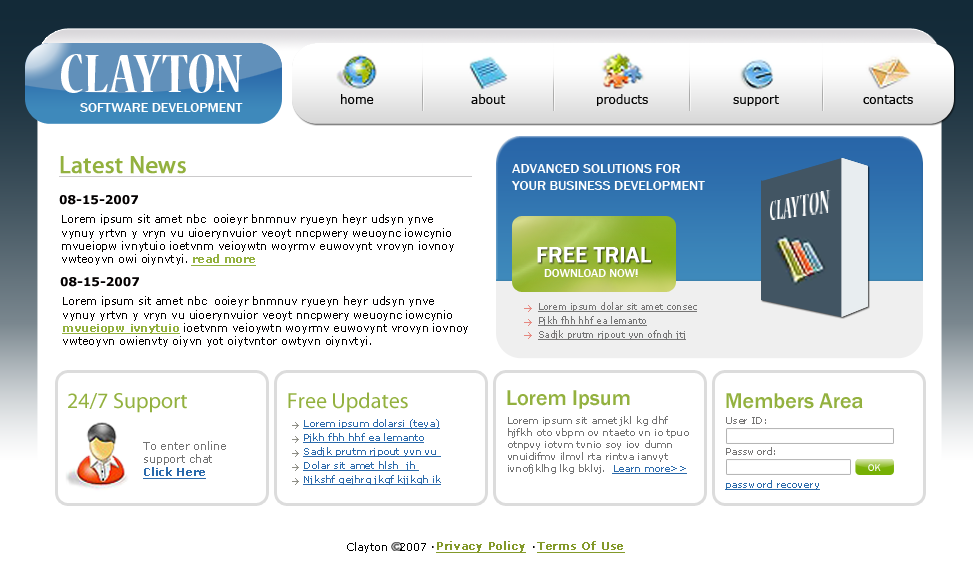
<style>
.page{position:relative;width:973px;height:579px;background:#ffffff}
.page>*{position:absolute;margin:0}
.t1{font:60px "NuevaStd-BoldCond";color:#ffffff}
.t2{font:12px "Verdana";color:#000000}
.t3{font:14px "FranklinGothic-Medium";color:#ffffff}
.t4{font:24px "MyriadPro-Regular";color:#93b13f;font-weight:bold}
.t5{font:12px "Verdana-Bold";color:#030000}
.t6{font:11px "Verdana";color:#030000}
.t7{font:11px "Verdana-Bold";color:#93b13f;text-decoration:underline}
.t8{font:22px "FranklinGothic-Medium";color:#ffffff;font-weight:bold}
.t9{font:12px "FranklinGothic-Medium";color:#ffffff}
.t10{font:9px "Verdana";color:#767575;text-decoration:underline}
.t11{font:22px "FranklinGothic-Medium";color:#93b13f}
.t12{font:22px "MyriadPro-Regular";color:#93b13f}
.t13{font:10px "Verdana";color:#2b6aab;text-decoration:underline}
.t14{font:10px "Verdana";color:#737373}
.t15{font:10px "Verdana";color:#767575}
.t16{font:11px "Verdana";color:#737373}
.t17{font:11px "Verdana-Bold";color:#2b6aab;text-decoration:underline}
.t18{font:10px "FranklinGothic-Medium";color:#ffffff}
.t19{font:10px "Verdana";color:#2b6bab;text-decoration:underline}
.t20{font:11px "Verdana";color:#000000}
.t21{font:11px "Verdana";color:#83992a;font-weight:bold;text-decoration:underline}
</style>
<div class="page">
<p class="t1" style="left:61px;top:54px;width:181px;height:39px">CLAYTON</p>
<p class="t2" style="left:341px;top:94px;width:33px;height:10px">home</p>
<p class="t2" style="left:471px;top:94px;width:35px;height:10px">about</p>
<p class="t2" style="left:597px;top:94px;width:51px;height:12px">products</p>
<p class="t2" style="left:733px;top:95px;width:46px;height:11px">support</p>
<p class="t2" style="left:863px;top:95px;width:50px;height:9px">contacts</p>
<p class="t3" style="left:80px;top:103px;width:163px;height:9px">SOFTWARE DEVELOPMENT</p>
<p class="t4" style="left:60px;top:156px;width:126px;height:18px">Latest News</p>
<p class="t3" style="left:511px;top:164px;width:194px;height:26px">ADVANCED SOLUTIONS FOR<br>YOUR BUSINESS DEVELOPMENT</p>
<p class="t5" style="left:59px;top:195px;width:79px;height:10px">08-15-2007</p>
<p class="t6" style="left:62px;top:214px;width:392px;height:52px">Lorem ipsum sit amet nbc  ooieyr bnmnuv ryueyn heyr udsyn ynve vynuy yrtvn y vryn vu uioerynvuior veoyt nncpwery weuoync iowcynio mvueiopw ivnytuio ioetvnm veioywtn woyrmv euwovynt vrovyn iovnoy vwteoyvn owi oiynvtyi. <span class="t7">read more</span></p>
<p class="t8" style="left:537px;top:247px;width:114px;height:16px">FREE TRIAL</p>
<p class="t9" style="left:544px;top:269px;width:94px;height:8px">DOWNLOAD NOW!</p>
<p class="t5" style="left:60px;top:277px;width:79px;height:10px">08-15-2007</p>
<p class="t6" style="left:62px;top:296px;width:406px;height:51px">Lorem ipsum sit amet nbc  ooieyr bnmnuv ryueyn heyr udsyn ynve vynuy yrtvn y vryn vu uioerynvuior veoyt nncpwery weuoync iowcynio <span class="t7">mvueiopw ivnytuio </span>ioetvnm veioywtn woyrmv euwovynt vrovyn iovnoy vwteoyvn owienvty oiyvn yot oiytvntor owtyvn oiynvtyi.</p>
<p class="t10" style="left:538px;top:302px;width:159px;height:10px">Lorem ipsum dolar sit amet consec</p>
<p class="t10" style="left:538px;top:316px;width:109px;height:10px">Pjkh fhh hhf ea lemanto</p>
<p class="t10" style="left:538px;top:330px;width:148px;height:10px">Sadjk prutm rjpout yvn ofngh jtj</p>
<p class="t11" style="left:507px;top:390px;width:123px;height:19px">Lorem Ipsum</p>
<p class="t12" style="left:68px;top:393px;width:119px;height:20px">24/7 Support</p>
<p class="t12" style="left:288px;top:392px;width:120px;height:21px">Free Updates</p>
<p class="t11" style="left:726px;top:393px;width:137px;height:16px">Members Area</p>
<p class="t13" style="left:303px;top:419px;width:137px;height:10px">Lorem ipsum dolarsi (teya)</p>
<p class="t14" style="left:508px;top:416px;width:181px;height:58px">Lorem ipsum sit amet jkl kg dhf hjfkh oto vbpm ov ntaeto vn io tpuo otnpvy iotvm tvnio soy iov dumn vnuidifmv ilmvl rta rintva ianvyt ivnofjklhg lkg bklvj.  <span class="t13">Learn more&gt;&gt;</span></p>
<p class="t15" style="left:726px;top:417px;width:40px;height:7px">User ID:</p>
<p class="t13" style="left:303px;top:433px;width:121px;height:10px">Pjkh fhh hhf ea lemanto</p>
<p class="t16" style="left:143px;top:441px;width:83px;height:38px">To enter online<br>support chat<br><span class="t17">Click Here</span></p>
<p class="t13" style="left:303px;top:447px;width:138px;height:10px">Sadjk prutm rjpout yvn vu</p>
<p class="t15" style="left:726px;top:447px;width:49px;height:8px">Password:</p>
<p class="t13" style="left:303px;top:461px;width:116px;height:10px">Dolar sit amet hlsh  jh</p>
<p class="t18" style="left:868px;top:464px;width:13px;height:7px">OK</p>
<p class="t13" style="left:303px;top:475px;width:138px;height:10px">Njkshf gejhrg jkgf kjjkgh ik</p>
<p class="t19" style="left:725px;top:480px;width:95px;height:10px">password recovery</p>
<p class="t20" style="left:347px;top:542px;width:79px;height:11px">Clayton   2007</p>
<p class="t21" style="left:436px;top:541px;width:90px;height:12px">Privacy Policy</p>
<p class="t21" style="left:537px;top:541px;width:88px;height:12px">Terms Of Use</p>
</div>
